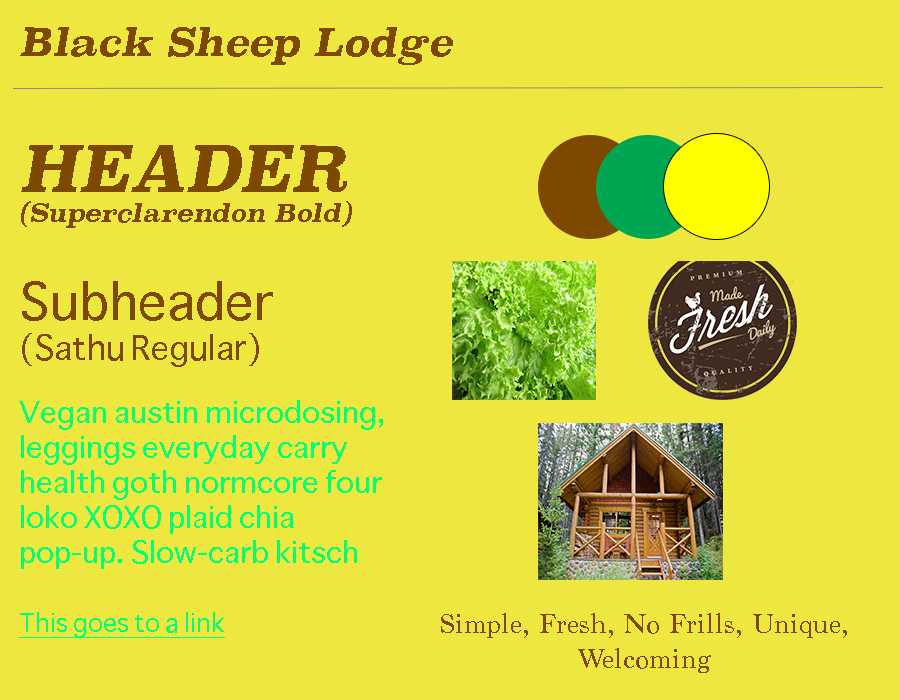
<style>
.page{position:relative;width:900px;height:700px;background:#ede73f}
.page>*{position:absolute;margin:0}
.t1{font:37.5px "Superclarendon-BoldItalic";color:#7d4900}
.t2{font:25px "Superclarendon-BoldItalic";color:#7d4900}
.t3{font:62.5px "Superclarendon-BoldItalic";color:#7d4900}
.t4{font:33.3px "Sathu";color:#7d4900}
.t5{font:50px "Sathu";color:#7d4900}
.t6{font:29.2px "Sathu";color:#00ff77}
.t7{font:25px "Sathu";color:#00ff77;text-decoration:underline}
.t8{font:29.2px "Marion-Regular";color:#7d4900}
</style>
<div class="page">
<p class="t1" style="left:20px;top:27px;width:433px;height:38px">Black Sheep Lodge</p>
<p class="t2" style="left:21px;top:145px;width:331px;height:83px"><span class="t3">HEADER<br></span>(Superclarendon Bold)</p>
<p class="t4" style="left:22px;top:281px;width:251px;height:86px"><span class="t5">Subheader<br></span>(Sathu Regular)</p>
<p class="t6" style="left:19px;top:400px;width:364px;height:169px">Vegan austin microdosing, leggings everyday carry health goth normcore four loko XOXO plaid chia pop-up. Slow-carb kitsch sriracha, paleo VHS vinyl everyday carry umami squid pour-over.</p>
<p class="t7" style="left:19px;top:612px;width:206px;height:26px">This goes to a link</p>
<p class="t8" style="left:441px;top:613px;width:406px;height:60px;text-align:center">Simple, Fresh, No Frills, Unique,<br>Welcoming</p>
</div>
